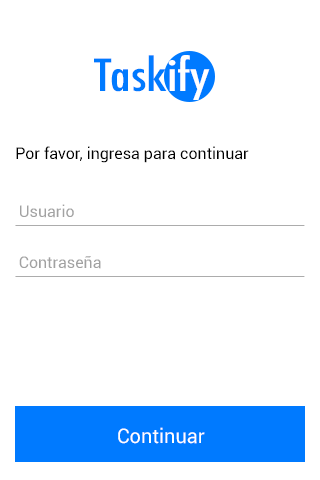
<style>
.page{position:relative;width:320px;height:480px;background:#ffffff}
.page>*{position:absolute;margin:0}
.t1{font:16px "Roboto-Regular";color:#000000}
.t2{font:16px "Roboto-Regular";color:#a1a1a1}
.t3{font:20px "Roboto-Regular";color:#ffffff}
</style>
<div class="page">
<p class="t1" style="left:16px;top:146px;width:233px;height:17px">Por favor, ingresa para continuar</p>
<p class="t2" style="left:20px;top:204px;width:54px;height:14px">Usuario</p>
<p class="t2" style="left:19px;top:256px;width:82px;height:13px">Contraseña</p>
<p class="t3" style="left:118px;top:427px;width:87px;height:17px">Continuar</p>
</div>
